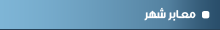
<style>
.page{position:relative;width:220px;height:30px}
.page>*{position:absolute;margin:0}
.t1{font:12px "Mj_Flow-Bold";color:#e7e7e7}
</style>
<div class="page">
<p class="t1" style="left:144px;top:7px;width:52px;height:14px">معـابر شهر</p>
</div>
